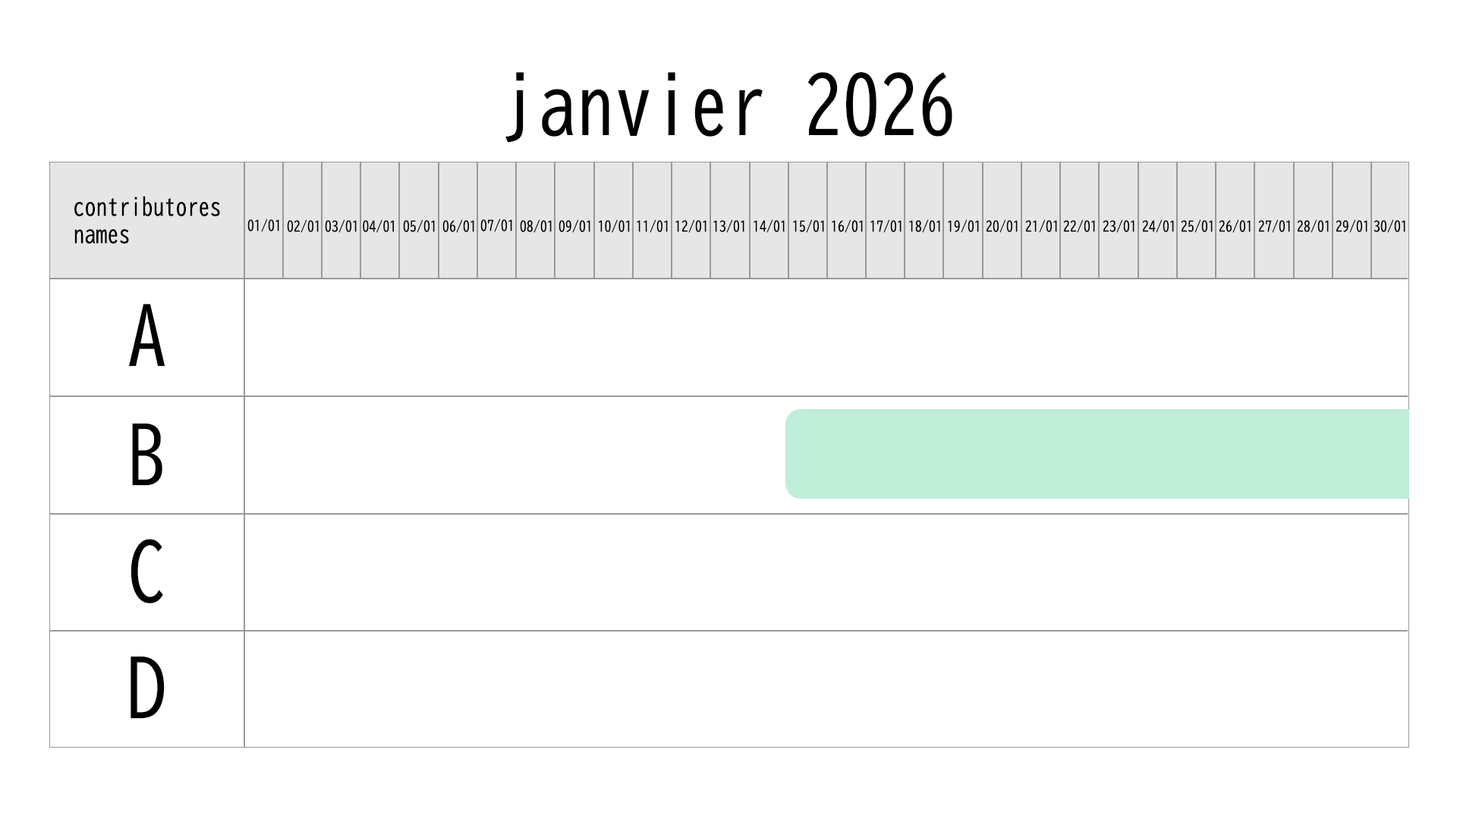
<style>
.page{position:relative;width:1457px;height:819px;background:#ffffff}
.page>*{position:absolute;margin:0}
.t1{font:75.9px "BIZ-UDGothic";color:#010101}
.t2{font:22.8px "BIZ-UDGothic";color:#010101}
.t3{font:13.7px "BIZ-UDGothic";color:#010101}
</style>
<div class="page">
<p class="t1" style="left:505px;top:72px;width:447px;height:71px">janvier 2026</p>
<p class="t2" style="left:74px;top:196px;width:146px;height:48px">contributores<br>names</p>
<p class="t3" style="left:247px;top:218px;width:32px;height:14px">01/01</p>
<p class="t3" style="left:287px;top:219px;width:32px;height:14px">02/01</p>
<p class="t3" style="left:325px;top:219px;width:32px;height:14px">03/01</p>
<p class="t3" style="left:363px;top:219px;width:31px;height:14px">04/01</p>
<p class="t3" style="left:403px;top:219px;width:32px;height:14px">05/01</p>
<p class="t3" style="left:442px;top:219px;width:32px;height:14px">06/01</p>
<p class="t3" style="left:480px;top:218px;width:32px;height:14px">07/01</p>
<p class="t3" style="left:520px;top:219px;width:32px;height:14px">08/01</p>
<p class="t3" style="left:558px;top:219px;width:32px;height:14px">09/01</p>
<p class="t3" style="left:598px;top:219px;width:32px;height:14px">10/01</p>
<p class="t3" style="left:637px;top:219px;width:31px;height:14px">11/01</p>
<p class="t3" style="left:675px;top:219px;width:31px;height:14px">12/01</p>
<p class="t3" style="left:713px;top:219px;width:31px;height:14px">13/01</p>
<p class="t3" style="left:753px;top:219px;width:31px;height:14px">14/01</p>
<p class="t3" style="left:793px;top:219px;width:31px;height:14px">15/01</p>
<p class="t3" style="left:832px;top:219px;width:31px;height:14px">16/01</p>
<p class="t3" style="left:870px;top:219px;width:31px;height:14px">17/01</p>
<p class="t3" style="left:909px;top:219px;width:31px;height:14px">18/01</p>
<p class="t3" style="left:948px;top:219px;width:31px;height:14px">19/01</p>
<p class="t3" style="left:986px;top:219px;width:31px;height:14px">20/01</p>
<p class="t3" style="left:1025px;top:219px;width:32px;height:14px">21/01</p>
<p class="t3" style="left:1063px;top:219px;width:32px;height:14px">22/01</p>
<p class="t3" style="left:1102px;top:219px;width:32px;height:14px">23/01</p>
<p class="t3" style="left:1142px;top:219px;width:32px;height:14px">24/01</p>
<p class="t3" style="left:1180px;top:219px;width:32px;height:14px">25/01</p>
<p class="t3" style="left:1218px;top:219px;width:32px;height:14px">26/01</p>
<p class="t3" style="left:1258px;top:219px;width:32px;height:14px">27/01</p>
<p class="t3" style="left:1297px;top:219px;width:31px;height:14px">28/01</p>
<p class="t3" style="left:1335px;top:219px;width:32px;height:14px">29/01</p>
<p class="t3" style="left:1373px;top:219px;width:32px;height:14px">30/01</p>
<p class="t1" style="left:129px;top:303px;width:36px;height:63px">A</p>
<p class="t1" style="left:132px;top:423px;width:30px;height:63px">B</p>
<p class="t1" style="left:130px;top:539px;width:33px;height:64px">C</p>
<p class="t1" style="left:130px;top:656px;width:35px;height:62px">D</p>
</div>
